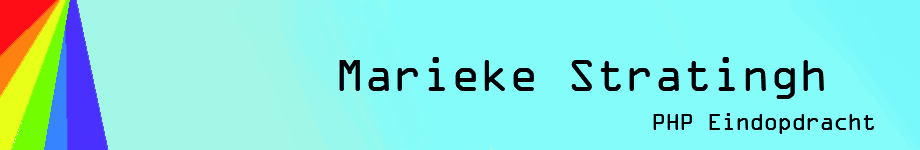
<style>
.page{position:relative;width:920px;height:150px;background:#84fcf9}
.page>*{position:absolute;margin:0}
.t1{font:48px "OCRAExtended";color:#010102}
.t2{font:24px "OCRAExtended";color:#010102}
</style>
<div class="page">
<p class="t1" style="left:339px;top:57px;width:485px;height:42px">Marieke Stratingh</p>
<p class="t2" style="left:653px;top:113px;width:221px;height:21px">PHP Eindopdracht</p>
</div>
